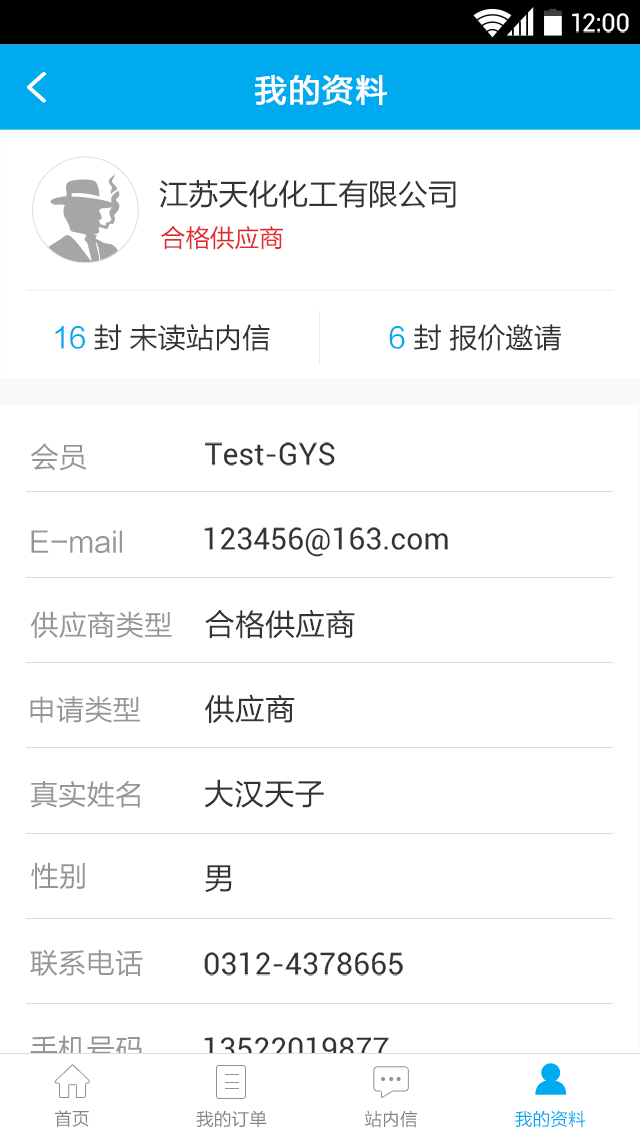
<style>
.page{position:relative;width:640px;height:1138px;background:#ffffff}
.page>*{position:absolute;margin:0}
.t1{font:24.9px "Roboto-Regular";color:#ffffff}
.t2{font:32px "FZLTHJW--GB1-0";letter-spacing:0.02em;color:#ffffff;font-weight:bold}
.t3{font:30.2px "FZLTHJW--GB1-0";letter-spacing:-0.01em;color:#333333;text-transform:uppercase}
.t4{font:24.9px "FZLTHJW--GB1-0";letter-spacing:-0.01em;color:#e1292e;text-transform:uppercase}
.t5{font:28.4px "FZLTHJW--GB1-0";letter-spacing:-0.01em;color:#333333;text-transform:uppercase}
.t6{font:28.4px "FZLTHJW--GB1-0";letter-spacing:-0.01em;color:#00aaee;text-transform:uppercase}
.t7{font:28.4px "FZLTHJW--GB1-0";color:#969696}
.t8{font:30.2px "Roboto-Regular";color:#333333}
.t9{font:30.2px "FZLTHJW--GB1-0";color:#333333}
.t10{font:17.8px "FZLTHJW--GB1-0";color:#848484}
.t11{font:17.8px "FZLTHJW--GB1-0";color:#00aaee}
</style>
<div class="page">
<p class="t1" style="left:572px;top:13px;width:57px;height:20px">12:00</p>
<p class="t2" style="left:255px;top:74px;width:132px;height:32px">我的资料</p>
<p class="t3" style="left:159px;top:179px;width:297px;height:29px">江苏天化化工有限公司</p>
<p class="t4" style="left:161px;top:226px;width:122px;height:24px">合格供应商</p>
<p class="t5" style="left:55px;top:324px;width:215px;height:27px"><span class="t6">16</span> 封 未读站内信</p>
<p class="t5" style="left:389px;top:324px;width:172px;height:27px"><span class="t6">6</span> 封 报价邀请</p>
<p class="t7" style="left:31px;top:443px;width:56px;height:28px">会员</p>
<p class="t8" style="left:205px;top:442px;width:130px;height:24px">Test-GYS</p>
<p class="t7" style="left:31px;top:530px;width:91px;height:23px">E-mail</p>
<p class="t8" style="left:204px;top:527px;width:244px;height:30px">123456@163.com</p>
<p class="t7" style="left:31px;top:611px;width:141px;height:27px">供应商类型</p>
<p class="t9" style="left:205px;top:609px;width:150px;height:30px">合格供应商</p>
<p class="t7" style="left:30px;top:696px;width:110px;height:27px">申请类型</p>
<p class="t9" style="left:205px;top:694px;width:90px;height:29px">供应商</p>
<p class="t7" style="left:30px;top:781px;width:110px;height:27px">真实姓名</p>
<p class="t9" style="left:204px;top:779px;width:120px;height:29px">大汉天子</p>
<p class="t7" style="left:31px;top:862px;width:54px;height:28px">性别</p>
<p class="t9" style="left:205px;top:865px;width:27px;height:27px">男</p>
<p class="t7" style="left:30px;top:949px;width:113px;height:27px">联系电话</p>
<p class="t8" style="left:204px;top:952px;width:199px;height:24px">0312-4378665</p>
<p class="t7" style="left:30px;top:1035px;width:112px;height:27px">手机号码</p>
<p class="t8" style="left:204px;top:1037px;width:185px;height:23px">13522019877</p>
<p class="t10" style="left:55px;top:1110px;width:34px;height:17px">首页</p>
<p class="t10" style="left:196px;top:1110px;width:71px;height:18px">我的订单</p>
<p class="t10" style="left:364px;top:1110px;width:53px;height:18px">站内信</p>
<p class="t11" style="left:515px;top:1110px;width:71px;height:18px">我的资料</p>
</div>
